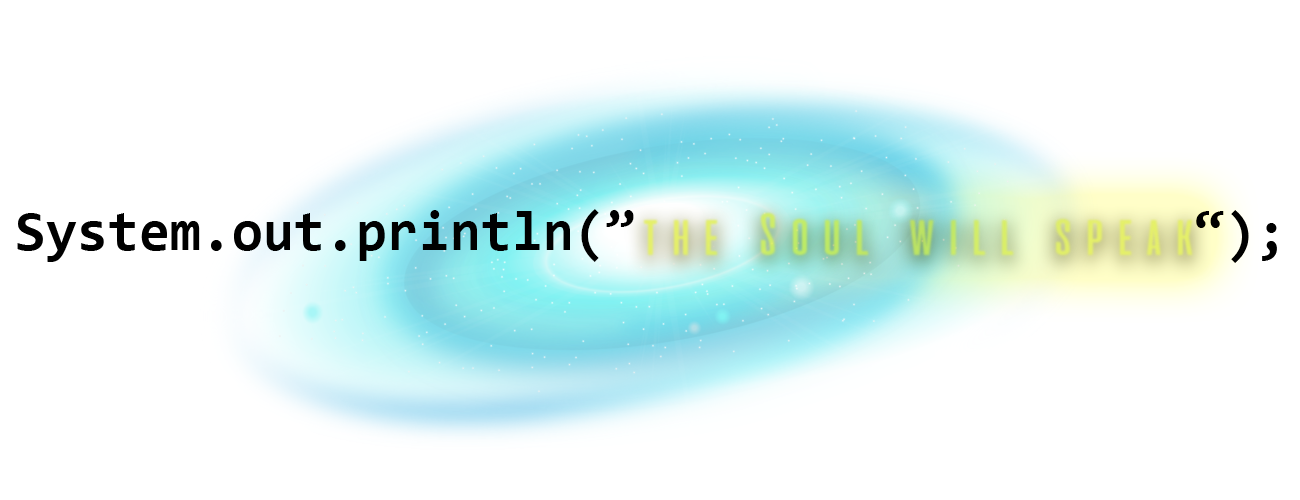
<style>
.page{position:relative;width:1300px;height:500px;background:#ffffff}
.page>*{position:absolute;margin:0}
.t1{font:56.4px "Consolas-Bold";color:#000000}
</style>
<div class="page">
<p class="t1" style="left:17px;top:209px;width:617px;height:53px">System.out.println(”</p>
<p class="t1" style="left:1196px;top:210px;width:81px;height:53px">“);</p>
</div>
